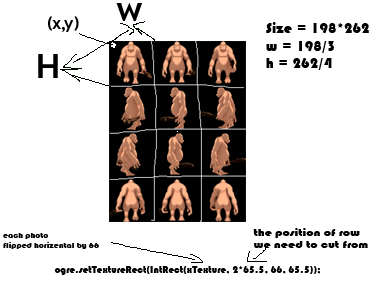
<style>
.page{position:relative;width:374px;height:282px;background:#ffffff}
.page>*{position:absolute;margin:0}
.t1{font:14px "TSSafaa-Medium";color:#000000;scale:1.03 1}
.t2{font:14.6px "Bauhaus93";color:#000000;scale:1.03 1}
.t3{font:8px "Bauhaus93";color:#000000;scale:1.12 1}
.t4{font:9.8px "Bauhaus93";color:#000000;scale:1.31 1}
</style>
<div class="page">
<p class="t1" style="left:48px;top:16px;width:31px;height:16px">(x,y)</p>
<p class="t2" style="left:266px;top:22px;width:103px;height:48px">Size = 198*262<br>w = 198/3<br>h = 262/4</p>
<p class="t3" style="left:3px;top:233px;width:96px;height:17px">each photo <br>flipped horizental by 66</p>
<p class="t4" style="left:253px;top:228px;width:115px;height:20px">the position of row <br>we need to cut from</p>
</div>
